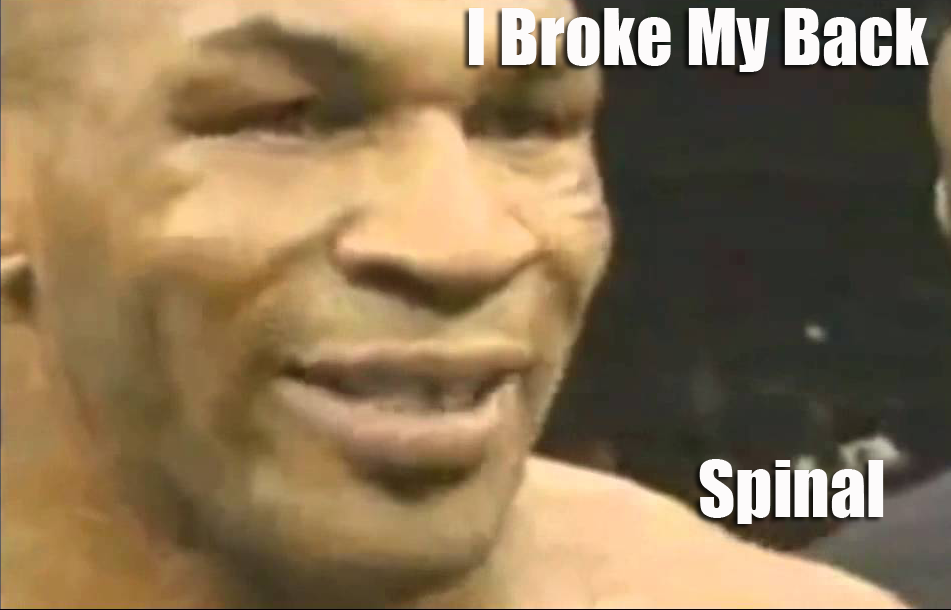
<style>
.page{position:relative;width:951px;height:610px}
.page>*{position:absolute;margin:0}
.t1{font:72px "Impact";color:#fdfbfb}
</style>
<div class="page">
<p class="t1" style="left:469px;top:8px;width:460px;height:64px">I Broke My Back</p>
<p class="t1" style="left:699px;top:459px;width:185px;height:65px">Spinal</p>
</div>
